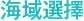
<style>
.page{position:relative;width:84px;height:21px;background:#ffffff}
.page>*{position:absolute;margin:0}
.t1{font:21px "GothicMB101Pr6N-Medium";color:#1dbdbf}
</style>
<div class="page">
<p class="t1" style="left:0px;top:0px;width:84px;height:20px">海域選擇</p>
</div>
